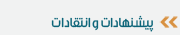
<style>
.page{position:relative;width:180px;height:35px;background:#f1f2f2}
.page>*{position:absolute;margin:0}
.t1{font:14px "Mj_Flow";letter-spacing:-0.001em;color:#0d6579}
</style>
<div class="page">
<p class="t1" style="left:51px;top:15px;width:103px;height:17px">پیشنهادات و انتقادات</p>
</div>
